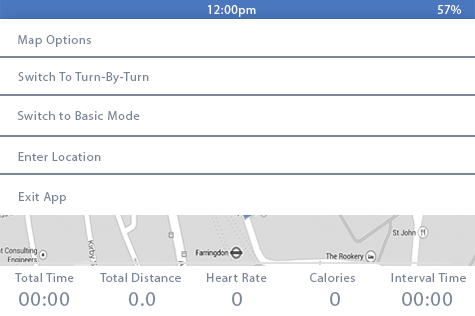
<style>
.page{position:relative;width:475px;height:316px;background:#ffffff}
.page>*{position:absolute;margin:0}
.t1{font:12.5px "MyriadPro-Regular";letter-spacing:0.05em;color:#ffffff}
.t2{font:12.5px "MyriadPro-Regular";letter-spacing:0.05em;color:#7a8599}
.t3{font:20.8px "MyriadPro-Regular";letter-spacing:0.05em;color:#7a8599}
</style>
<div class="page">
<p class="t1" style="left:208px;top:5px;width:48px;height:12px">12:00pm</p>
<p class="t1" style="left:437px;top:5px;width:24px;height:9px">57%</p>
<p class="t2" style="left:18px;top:35px;width:73px;height:12px">Map Options</p>
<p class="t2" style="left:18px;top:72px;width:131px;height:12px">Switch To Turn-By-Turn</p>
<p class="t2" style="left:17px;top:111px;width:123px;height:9px">Switch to Basic Mode</p>
<p class="t2" style="left:18px;top:152px;width:83px;height:9px">Enter Location</p>
<p class="t2" style="left:19px;top:192px;width:47px;height:12px">Exit App</p>
<p class="t2" style="left:15px;top:273px;width:59px;height:9px">Total Time</p>
<p class="t2" style="left:100px;top:273px;width:81px;height:9px">Total Distance</p>
<p class="t2" style="left:207px;top:273px;width:60px;height:9px">Heart Rate</p>
<p class="t2" style="left:310px;top:273px;width:45px;height:9px">Calories</p>
<p class="t2" style="left:391px;top:273px;width:75px;height:9px">Interval Time</p>
<p class="t3" style="left:19px;top:292px;width:51px;height:14px">00:00</p>
<p class="t3" style="left:128px;top:292px;width:28px;height:14px">0.0</p>
<p class="t3" style="left:232px;top:292px;width:10px;height:14px">0</p>
<p class="t3" style="left:330px;top:292px;width:10px;height:14px">0</p>
<p class="t3" style="left:402px;top:292px;width:51px;height:14px">00:00</p>
</div>
